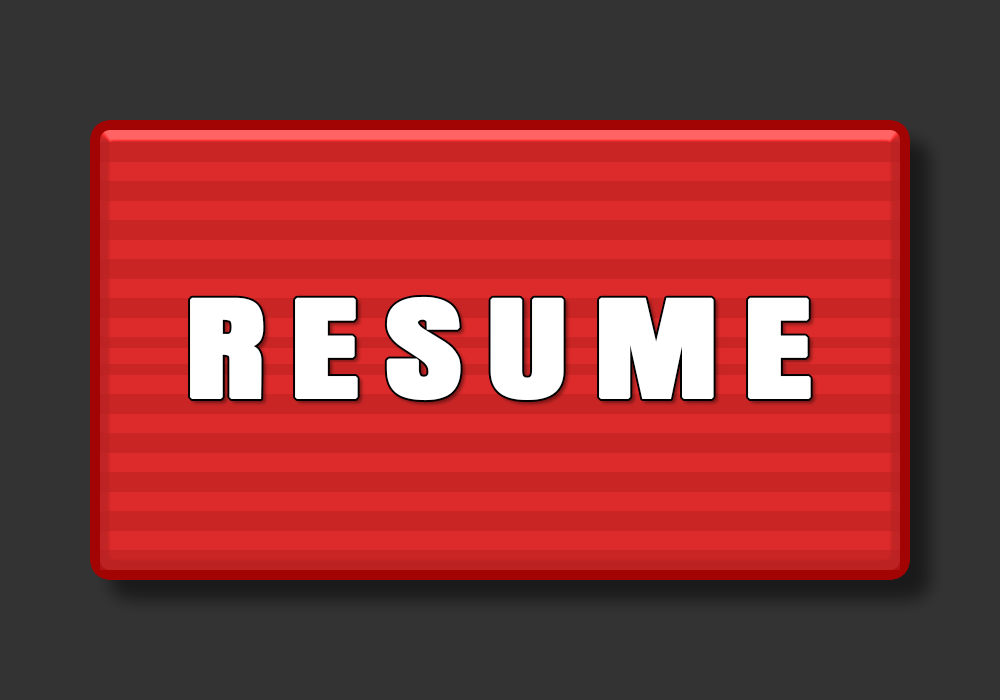
<style>
.page{position:relative;width:1000px;height:700px;background:#333333}
.page>*{position:absolute;margin:0}
.t1{font:125px "Anton";letter-spacing:0.125em;color:#ffffff;font-weight:bold;scale:1.32 1}
</style>
<div class="page">
<p class="t1" style="left:190px;top:296px;width:621px;height:105px">RESUME</p>
</div>
